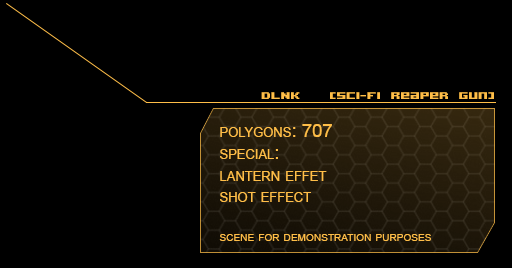
<style>
.page{position:relative;width:512px;height:268px;background:#000000}
.page>*{position:absolute;margin:0}
.t1{font:18px "AcknowledgeTTBRK";color:#ffbe48;scale:1.03 1}
.t2{font:18px "ArialMT";color:#ffbe48;font-variant:small-caps;scale:1.03 1}
.t3{font:14px "ArialMT";color:#ffbe48;font-variant:small-caps;scale:1.03 1}
</style>
<div class="page">
<p class="t1" style="left:261px;top:92px;width:233px;height:7px">DLNK   [Sci-Fi Reaper Gun]</p>
<p class="t2" style="left:219px;top:124px;width:212px;height:117px">polygons: 707<br>special:<br>lantern effet<br>shot effect<br><br><span class="t3">scene for demonstration purposes</span></p>
</div>
